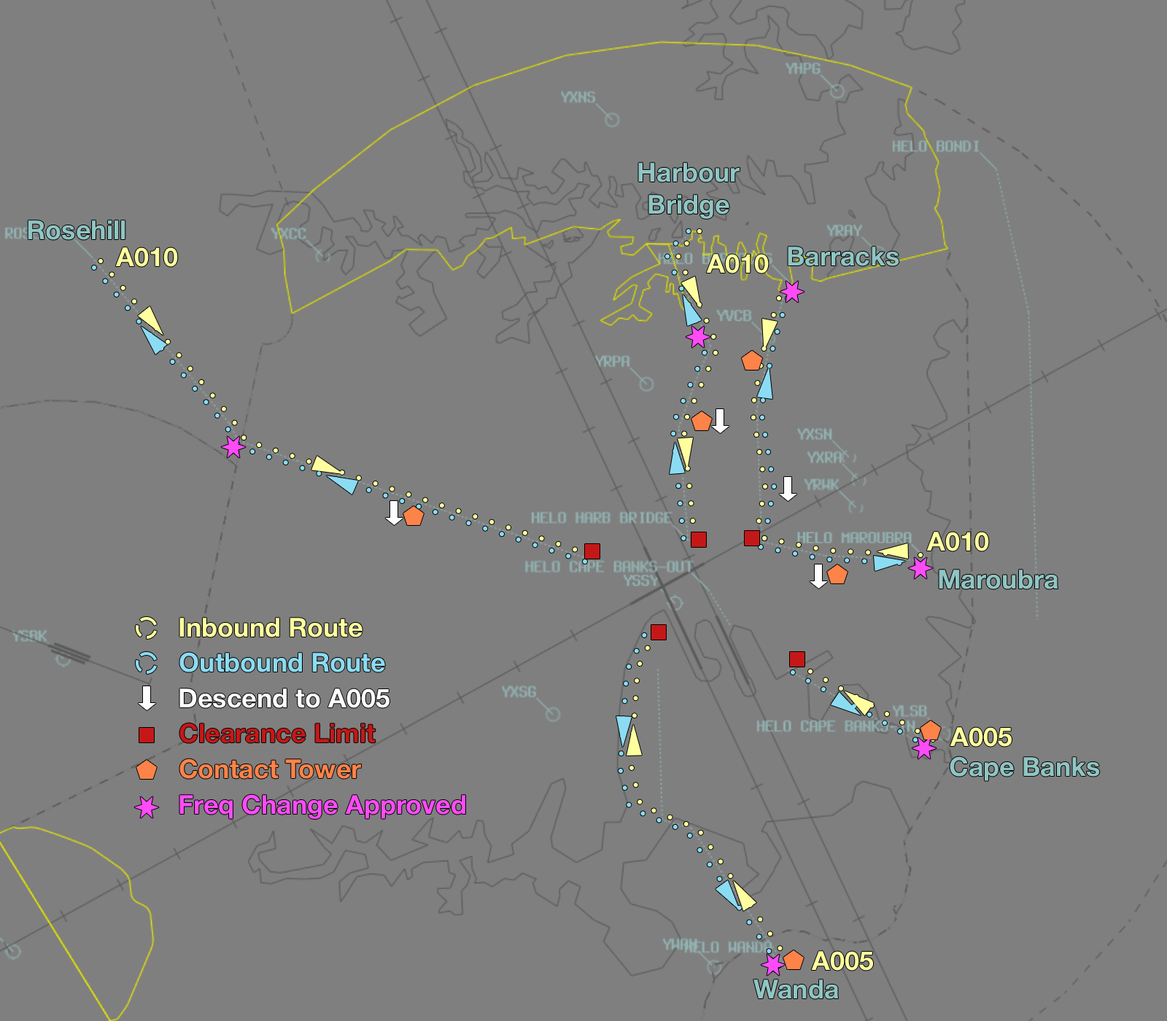
<style>
.page{position:relative;width:1167px;height:1021px;background:#7f7f7f}
.page>*{position:absolute;margin:0}
.t1{font:26.3px "HelveticaNeue-Bold";color:#90c5c3}
.t2{font:26.3px "HelveticaNeue-Bold";color:#ffffa0}
.t3{font:26.3px "HelveticaNeue-Bold";color:#8bdcf3}
.t4{font:26.3px "HelveticaNeue-Bold";color:#fefefe}
.t5{font:26.3px "HelveticaNeue-Bold";color:#c41818}
.t6{font:26.3px "HelveticaNeue-Bold";color:#fe8349}
.t7{font:26.3px "HelveticaNeue-Bold";color:#fe4bf8}
</style>
<div class="page">
<p class="t1" style="left:638px;top:163px;width:102px;height:56px;text-align:center">Harbour<br>Bridge</p>
<p class="t1" style="left:28px;top:220px;width:97px;height:20px">Rosehill</p>
<p class="t2" style="left:115px;top:247px;width:63px;height:20px">A010</p>
<p class="t2" style="left:706px;top:254px;width:63px;height:20px">A010</p>
<p class="t1" style="left:788px;top:247px;width:112px;height:19px">Barracks</p>
<p class="t2" style="left:927px;top:532px;width:62px;height:20px">A010</p>
<p class="t1" style="left:939px;top:570px;width:120px;height:20px">Maroubra</p>
<p class="t2" style="left:179px;top:618px;width:184px;height:20px">Inbound Route</p>
<p class="t3" style="left:179px;top:652px;width:206px;height:21px">Outbound Route</p>
<p class="t4" style="left:179px;top:689px;width:211px;height:19px">Descend to A005</p>
<p class="t5" style="left:179px;top:723px;width:197px;height:20px">Clearance Limit</p>
<p class="t2" style="left:950px;top:727px;width:62px;height:20px">A005</p>
<p class="t6" style="left:179px;top:759px;width:182px;height:20px">Contact Tower</p>
<p class="t1" style="left:950px;top:757px;width:150px;height:24px">Cape Banks</p>
<p class="t7" style="left:179px;top:795px;width:286px;height:24px">Freq Change Approved</p>
<p class="t2" style="left:811px;top:951px;width:62px;height:20px">A005</p>
<p class="t1" style="left:754px;top:980px;width:85px;height:20px">Wanda</p>
</div>
